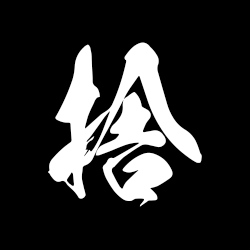
<style>
.page{position:relative;width:250px;height:250px;background:#000000}
.page>*{position:absolute;margin:0}
.t1{font:200px "KsoKokuryuSou";color:#ffffff;text-transform:uppercase;scale:0.9 1}
</style>
<div class="page">
<p class="t1" style="left:48px;top:42px;width:154px;height:165px">捨</p>
</div>
